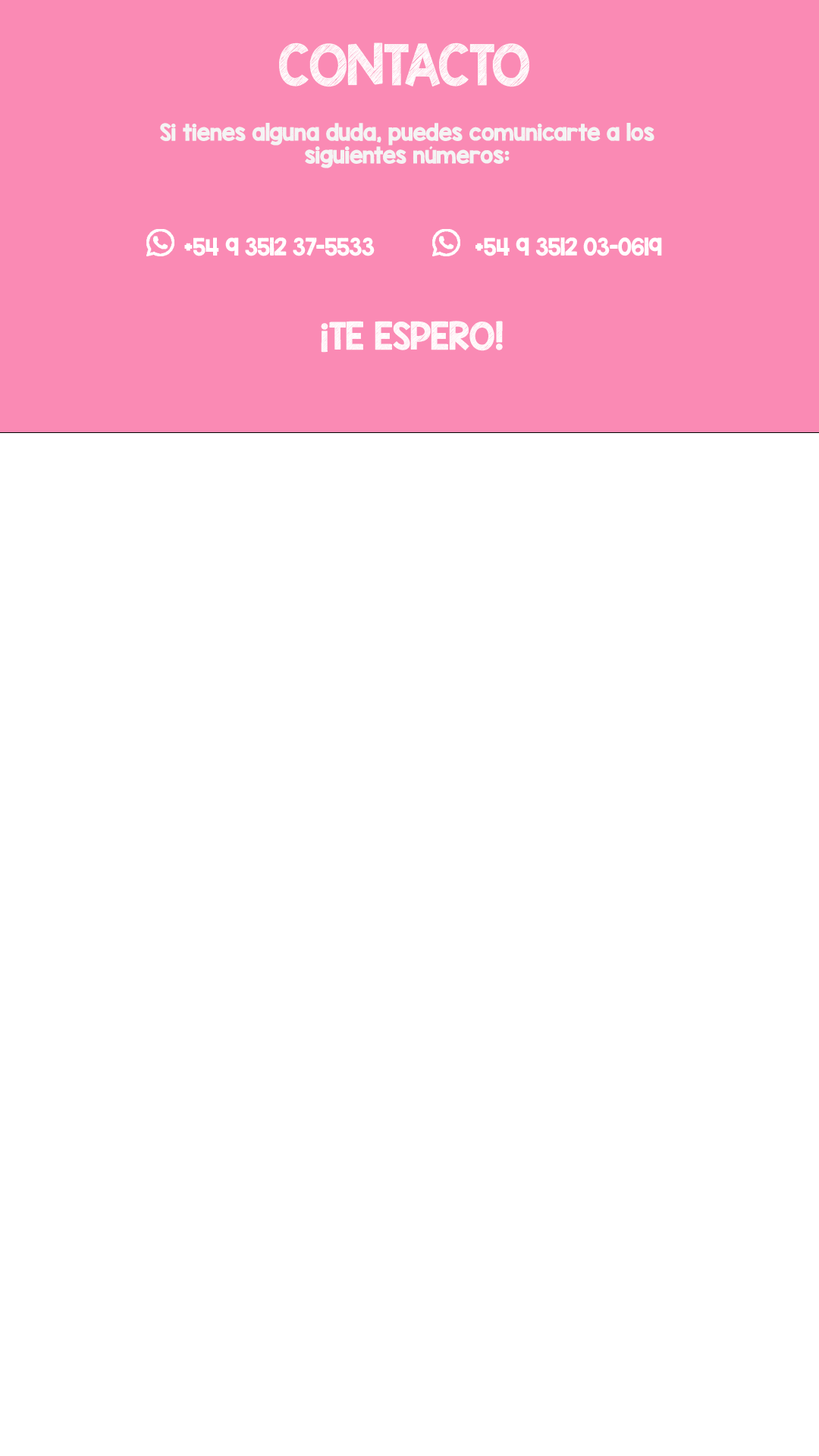
<style>
.page{position:relative;width:819px;height:1456px;background:#ffffff}
.page>*{position:absolute;margin:0}
.t1{font:45.5px "KGBlankSpaceSketch";color:#ffffff}
.t2{font:19px "KGBlankSpaceSketch";color:#f4f4f4}
.t3{font:19px "KGBlankSpaceSketch";color:#ffffff}
.t4{font:30.3px "KGBlankSpaceSketch";color:#ffffff}
</style>
<div class="page">
<p class="t1" style="left:279px;top:42px;width:251px;height:45px">CONTACTO</p>
<p class="t2" style="left:160px;top:123px;width:494px;height:45px;text-align:center">Si tienes alguna duda, puedes comunicarte a los siguientes números:</p>
<p class="t3" style="left:184px;top:237px;width:191px;height:19px">+54 9 3512 37-5533</p>
<p class="t3" style="left:475px;top:237px;width:187px;height:19px">+54 9 3512 03-0619</p>
<p class="t4" style="left:321px;top:321px;width:182px;height:32px">¡TE ESPERO!</p>
</div>
